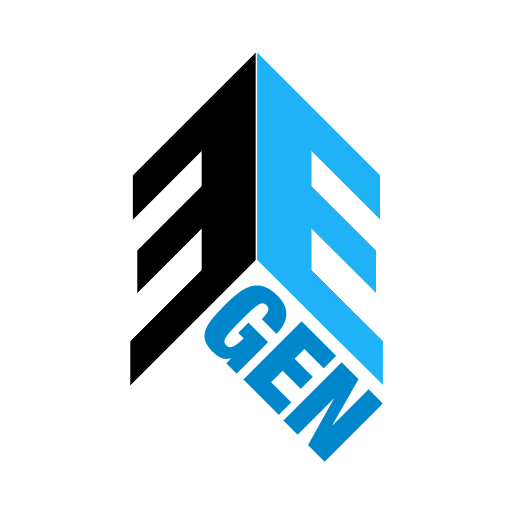
<style>
.page{position:relative;width:512px;height:512px;background:#ffffff}
.page>*{position:absolute;margin:0}
.t1{font:115.5px "HelveticaNeue-CondensedBlack";color:#0087cb}
</style>
<div class="page">
<p class="t1" style="left:204px;top:285px;width:179px;height:177px;rotate:45deg">GEN</p>
</div>
